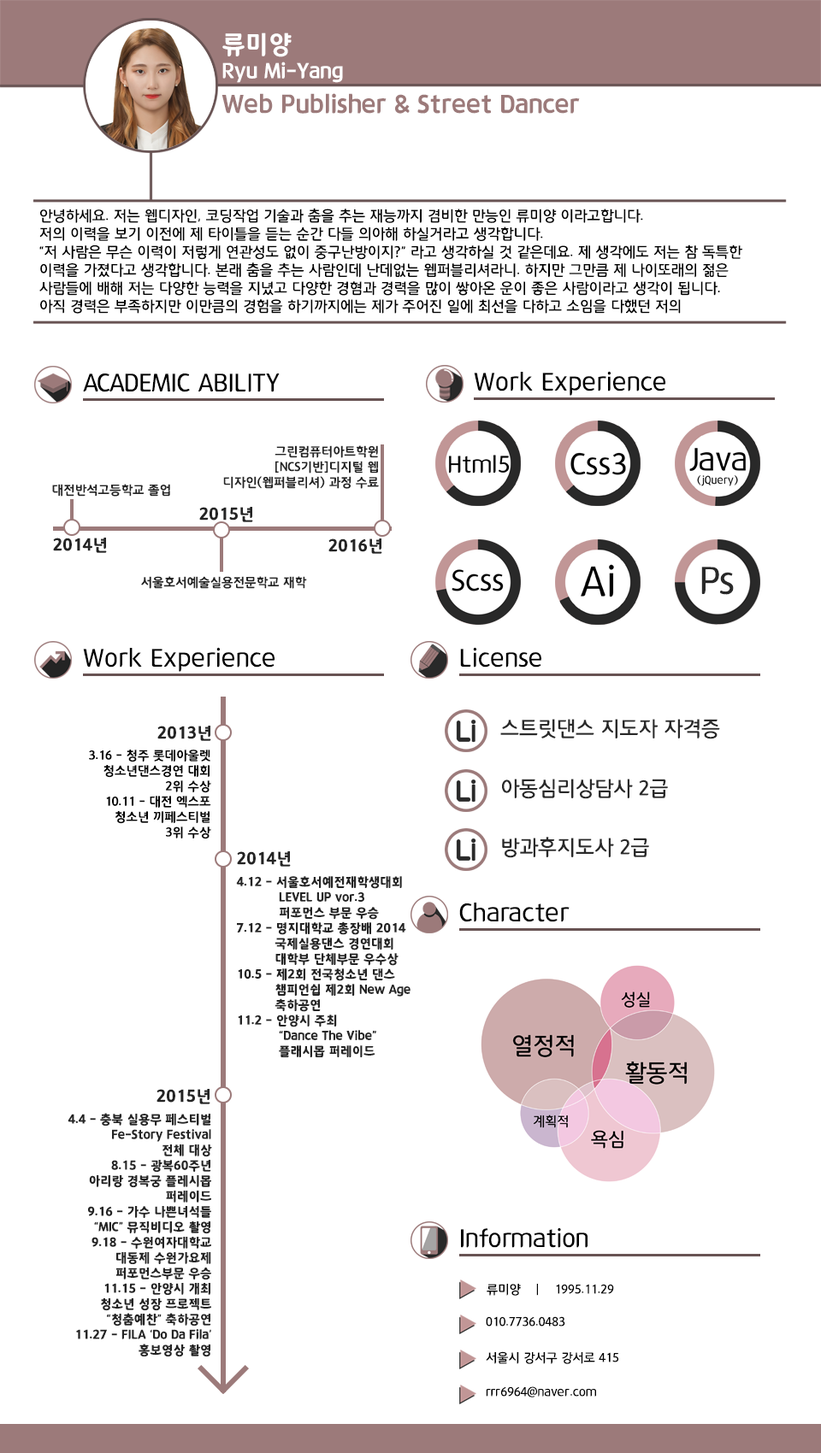
<style>
.page{position:relative;width:821px;height:1453px;background:#ffffff}
.page>*{position:absolute;margin:0}
.t1{font:21.4px "12LotteMartHappyBold";color:#ffffff}
.t2{font:25.7px "12LotteMartHappyBold";color:#ffffff}
.t3{font:25.7px "12LotteMartHappyBold";color:#9c7a7a}
.t4{font:15.1px "12LotteMartDreamMedium";color:#000000}
.t5{font:25.6px "12LotteMartDreamMedium";color:#000000}
.t6{font:12.8px "12LotteMartDreamBold";color:#242424}
.t7{font:17.1px "12LotteMartHappyBold";color:#242424}
.t8{font:38.5px "12LotteMartDreamMedium";color:#292929}
.t9{font:21.4px "12LotteMartDreamMedium";color:#292929}
.t10{font:12.8px "12LotteMartDreamBold";color:#000000}
.t11{font:12.8px "12LotteMartHappyBold";color:#242424}
.t12{font:12.8px "12LotteMartDreamMedium";color:#000000}
</style>
<div class="page">
<p class="t1" style="left:222px;top:32px;width:121px;height:51px"><span class="t2">류미양<br></span>Ryu Mi-Yang</p>
<p class="t3" style="left:221px;top:93px;width:359px;height:21px">Web Publisher &amp; Street Dancer</p>
<p class="t4" style="left:39px;top:208px;width:703px;height:106px">안녕하세요. 저는 웹디자인, 코딩작업 기술과 춤을 추는 재능까지 겸비한 만능인 류미양 이라고합니다.<br>저의 이력을 보기 이전에 제 타이틀을 듣는 순간 다들 의아해 하실거라고 생각합니다.<br>“저 사람은 무슨 이력이 저렇게 연관성도 없이 중구난방이지?” 라고 생각하실 것 같은데요. 제 생각에도 저는 참 독특한 이력을 가졌다고 생각합니다. 본래 춤을 추는 사람인데 난데없는 웹퍼블리셔라니. 하지만 그만큼 제 나이또래의 젊은 사람들에 배해 저는 다양한 능력을 지녔고 다양한 경혐과 경력을 많이 쌓아온 운이 좋은 사람이라고 생각이 됩니다.<br>아직 경력은 부족하지만 이만큼의 경험을 하기까지에는 제가 주어진 일에 최선을 다하고 소임을 다했던 저의</p>
<p class="t5" style="left:83px;top:374px;width:197px;height:18px">ACADEMIC ABILITY</p>
<p class="t5" style="left:474px;top:371px;width:191px;height:25px">Work Experience</p>
<p class="t6" style="left:223px;top:445px;width:156px;height:44px;text-align:right">그린컴퓨터아트학원<br> [NCS기반]디지털 웹 디자인(웹퍼블리셔) 과정 수료</p>
<p class="t6" style="left:52px;top:484px;width:118px;height:13px">대전반석고등학교 졸업</p>
<p class="t7" style="left:199px;top:507px;width:54px;height:15px">2015년</p>
<p class="t7" style="left:53px;top:538px;width:54px;height:15px">2014년</p>
<p class="t7" style="left:328px;top:539px;width:54px;height:15px">2016년</p>
<p class="t8" style="left:701px;top:567px;width:32px;height:28px">Ps</p>
<p class="t6" style="left:141px;top:576px;width:166px;height:13px">서울호서예술실용전문학교 재학</p>
<p class="t5" style="left:83px;top:647px;width:191px;height:25px">Work Experience</p>
<p class="t5" style="left:460px;top:647px;width:81px;height:21px">License</p>
<p class="t7" style="left:157px;top:726px;width:54px;height:15px">2013년</p>
<p class="t9" style="left:500px;top:719px;width:220px;height:20px">스트릿댄스 지도자 자격증</p>
<p class="t10" style="left:89px;top:750px;width:122px;height:89px;text-align:right">3.16 - 청주 롯데아울렛<br>          청소년댄스경연 대회 2위 수상<br>10.11 - 대전 엑스포<br>           청소년 끼페스티벌<br>3위 수상</p>
<p class="t9" style="left:502px;top:779px;width:166px;height:20px">아동심리상담사 2급</p>
<p class="t9" style="left:502px;top:837px;width:147px;height:21px">방과후지도사 2급</p>
<p class="t7" style="left:237px;top:851px;width:54px;height:16px">2014년</p>
<p class="t11" style="left:236px;top:876px;width:174px;height:181px">4.12 - 서울호서예전재학생대회<br>           LEVEL UP vor.3<br>           퍼포먼스 부문 우승<br>7.12 - 명지대학교 총장배 2014<br>          국제실용댄스 경연대회<br>          대학부 단체부문 우수상<br>10.5 - 제2회 전국청소년 댄스<br>          챔피언쉽 제2회 New Age<br>          축하공연<br>11.2 - 안양시 주최<br>           “Dance The Vibe”<br>           플래시몹 퍼레이드</p>
<p class="t5" style="left:459px;top:903px;width:110px;height:19px">Character</p>
<p class="t7" style="left:156px;top:1089px;width:54px;height:15px">2015년</p>
<p class="t11" style="left:68px;top:1113px;width:144px;height:244px;text-align:right">4.4 - 충북 실용무 페스티벌 Fe-Story Festival<br>전체 대상<br>8.15 - 광복60주년<br>아리랑 경복궁 플레시몹 퍼레이드<br>9.16 - 가수 나쁜녀석들<br>“MIC” 뮤직비디오 촬영<br>9.18 - 수원여자대학교 대동제 수원가요제 퍼포먼스부문 우승<br>11.15 - 안양시 개최 청소년 성장 프로젝트 <br>“청춤예찬” 축하공연<br>11.27 - FILA ‘Do Da Fila’ 홍보영상 촬영</p>
<p class="t5" style="left:461px;top:1227px;width:126px;height:21px">Information</p>
<p class="t12" style="left:486px;top:1284px;width:128px;height:12px">류미양    |    1995.11.29</p>
<p class="t12" style="left:486px;top:1316px;width:79px;height:11px">010.7736.0483</p>
<p class="t12" style="left:486px;top:1351px;width:133px;height:13px">서울시 강서구 강서로 415</p>
<p class="t12" style="left:486px;top:1386px;width:110px;height:12px">rrr6964@naver.com</p>
</div>
